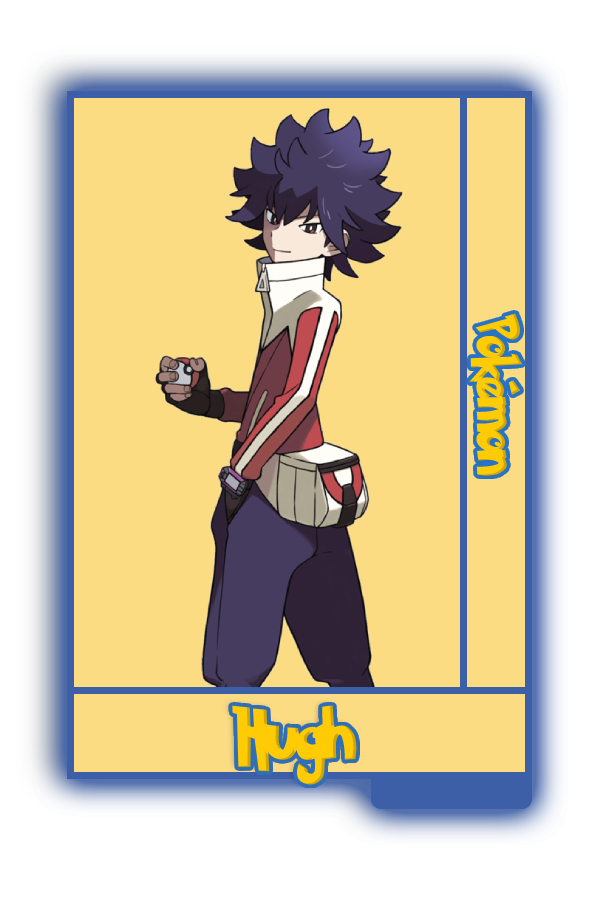
<style>
.page{position:relative;width:600px;height:900px;background:#fbdc83}
.page>*{position:absolute;margin:0}
.t1{font:48.8px "PokemonSolidNormal";color:#ffcb05;scale:0.8 1}
.t2{font:56.6px "PokemonSolidNormal";color:#ffcb05;scale:0.92 1}
</style>
<div class="page">
<p class="t1" style="left:469px;top:313px;width:54px;height:163px;rotate:90deg">Pokémon</p>
<p class="t2" style="left:232px;top:705px;width:125px;height:80px">Hugh</p>
</div>
